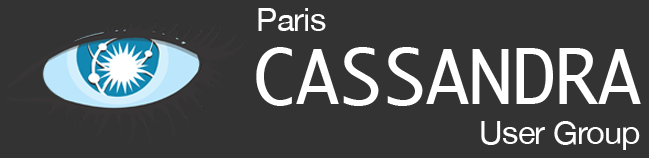
<style>
.page{position:relative;width:649px;height:158px;background:#333333}
.page>*{position:absolute;margin:0}
.t1{font:31.8px "HelveticaNeue";letter-spacing:-0.025em;color:#ffffff}
.t2{font:73px "Ayuthaya";letter-spacing:-0.025em;color:#ffffff}
</style>
<div class="page">
<p class="t1" style="left:258px;top:8px;width:68px;height:23px">Paris</p>
<p class="t2" style="left:256px;top:47px;width:385px;height:59px">CASSANDRA</p>
<p class="t1" style="left:481px;top:121px;width:159px;height:29px">User Group</p>
</div>
